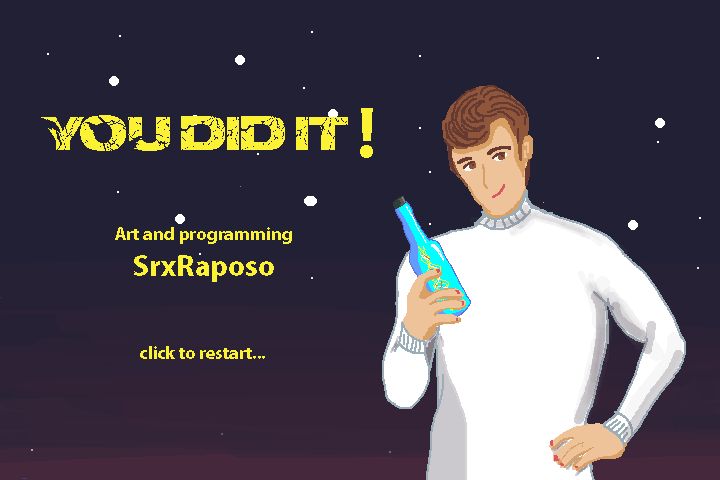
<style>
.page{position:relative;width:720px;height:480px;background:#222034}
.page>*{position:absolute;margin:0}
.t1{font:72px "MyriadPro-Bold";color:#fbf236}
.t2{font:36px "electrical";color:#fbf236}
.t3{font:18px "MyriadPro-Bold";color:#fbf236}
.t4{font:30px "MyriadPro-Bold";color:#fbf236}
</style>
<div class="page">
<p class="t1" style="left:360px;top:108px;width:13px;height:50px">!</p>
<p class="t2" style="left:41px;top:115px;width:307px;height:36px">YOU DID IT</p>
<p class="t3" style="left:115px;top:227px;width:177px;height:55px;text-align:center">Art and programming<br><span class="t4">SrxRaposo</span></p>
<p class="t3" style="left:140px;top:346px;width:125px;height:13px">click to restart...</p>
</div>
